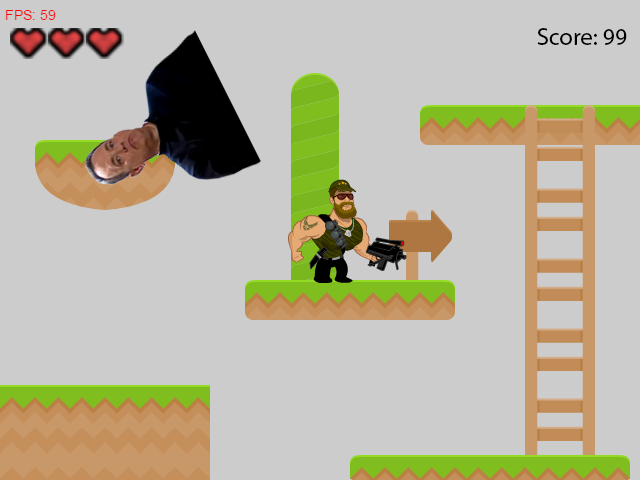
<style>
.page{position:relative;width:640px;height:480px;background:#cccccc}
.page>*{position:absolute;margin:0}
.t1{font:24px "MyriadPro-Regular";color:#000000}
</style>
<div class="page">
<p class="t1" style="left:537px;top:28px;width:90px;height:17px">Score: 99</p>
</div>
